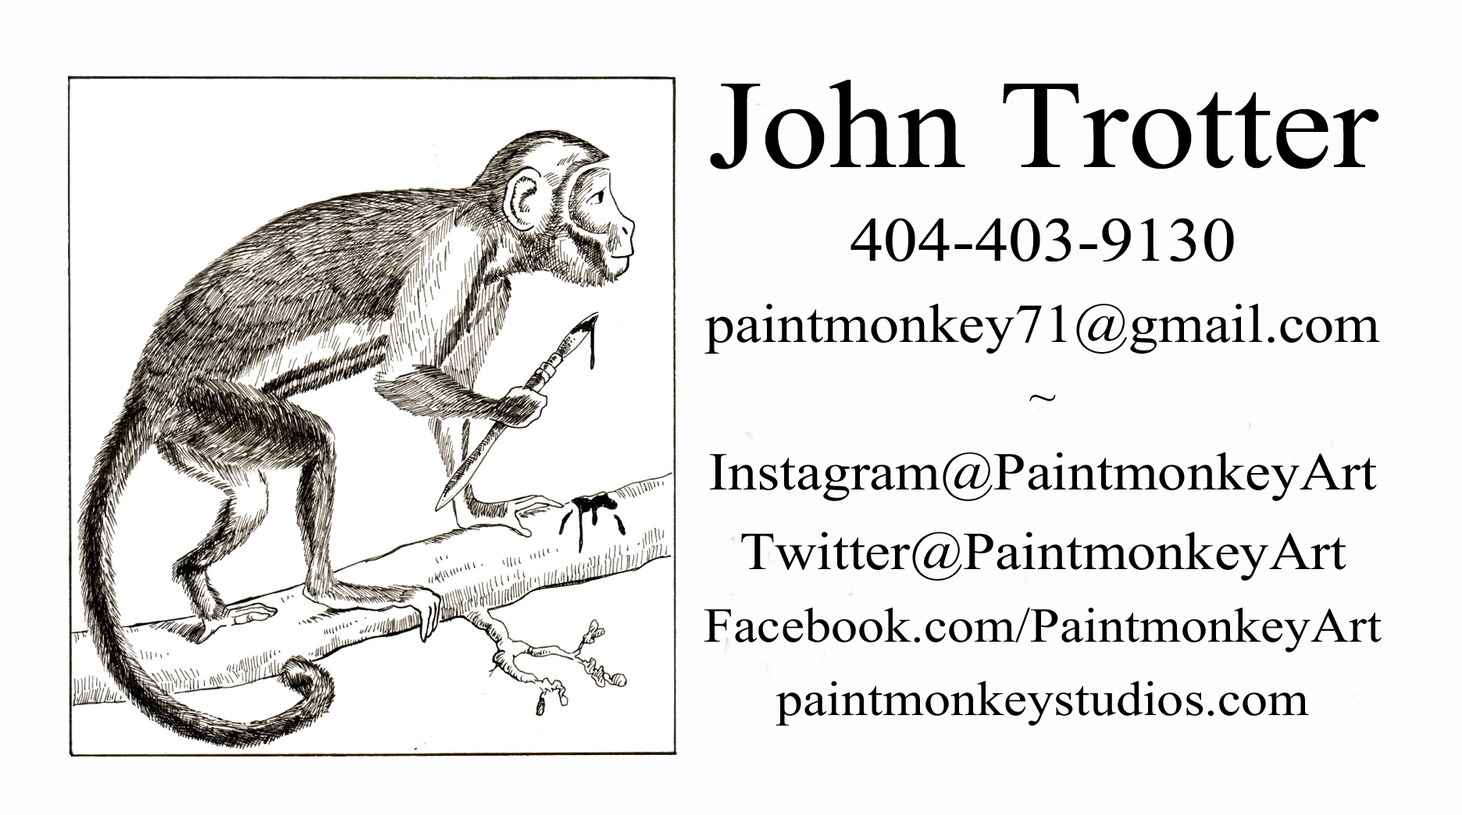
<style>
.page{position:relative;width:1462px;height:815px;background:#fefdfe}
.page>*{position:absolute;margin:0}
.t1{font:60.9px "Aparajita";color:#000000;scale:1.08 1}
.t2{font:156.2px "Aparajita";color:#000000;scale:1.08 1}
.t3{font:78.1px "Aparajita";color:#000000;scale:1.08 1}
.t4{font:68px "Aparajita";color:#000000;scale:1.08 1}
.t5{font:56.2px "Aparajita";color:#000000;scale:1.08 1}
.t6{font:66.4px "Aparajita";color:#000000;scale:1.08 1}
</style>
<div class="page">
<p class="t1" style="left:705px;top:80px;width:677px;height:646px;text-align:center"><span class="t2">John Trotter<br></span><span class="t3">404-403-9130<br></span><span class="t4">paintmonkey71@gmail.com<br></span><span class="t5">~<br></span><span class="t6">Instagram@PaintmonkeyArt<br>Twitter@PaintmonkeyArt<br></span>Facebook.com/PaintmonkeyArt<br>paintmonkeystudios.com</p>
</div>
